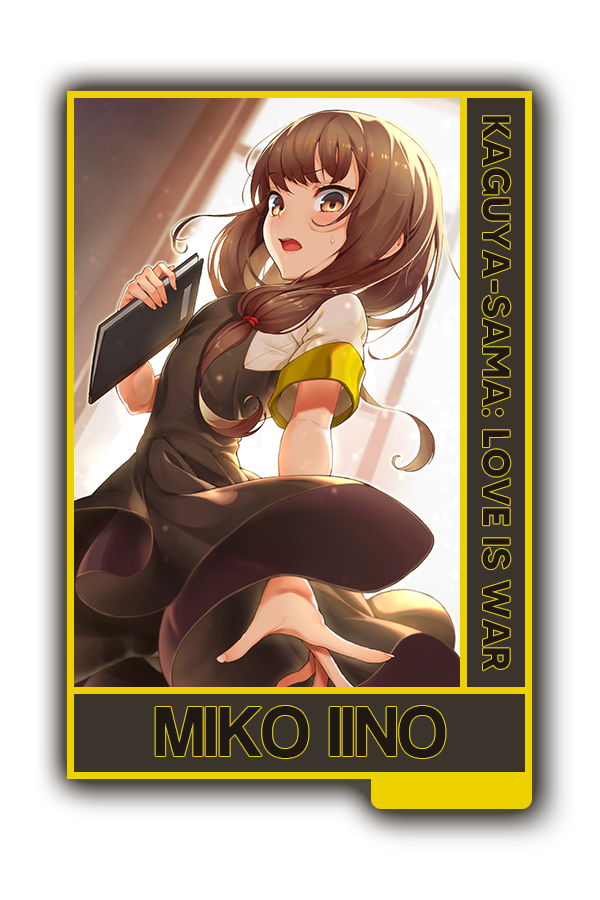
<style>
.page{position:relative;width:600px;height:900px;background:#ffffff}
.page>*{position:absolute;margin:0}
.t1{font:38.3px "MADETOMMY-Bold";color:#1b1717}
.t2{font:72.7px "CoolveticaRg-Regular";color:#1b1717}
</style>
<div class="page">
<p class="t1" style="left:482px;top:116px;width:29px;height:555px;rotate:90deg">KAGUYA-SAMA: LOVE IS WAR</p>
<p class="t2" style="left:155px;top:706px;width:291px;height:52px">MIKO IINO</p>
</div>
